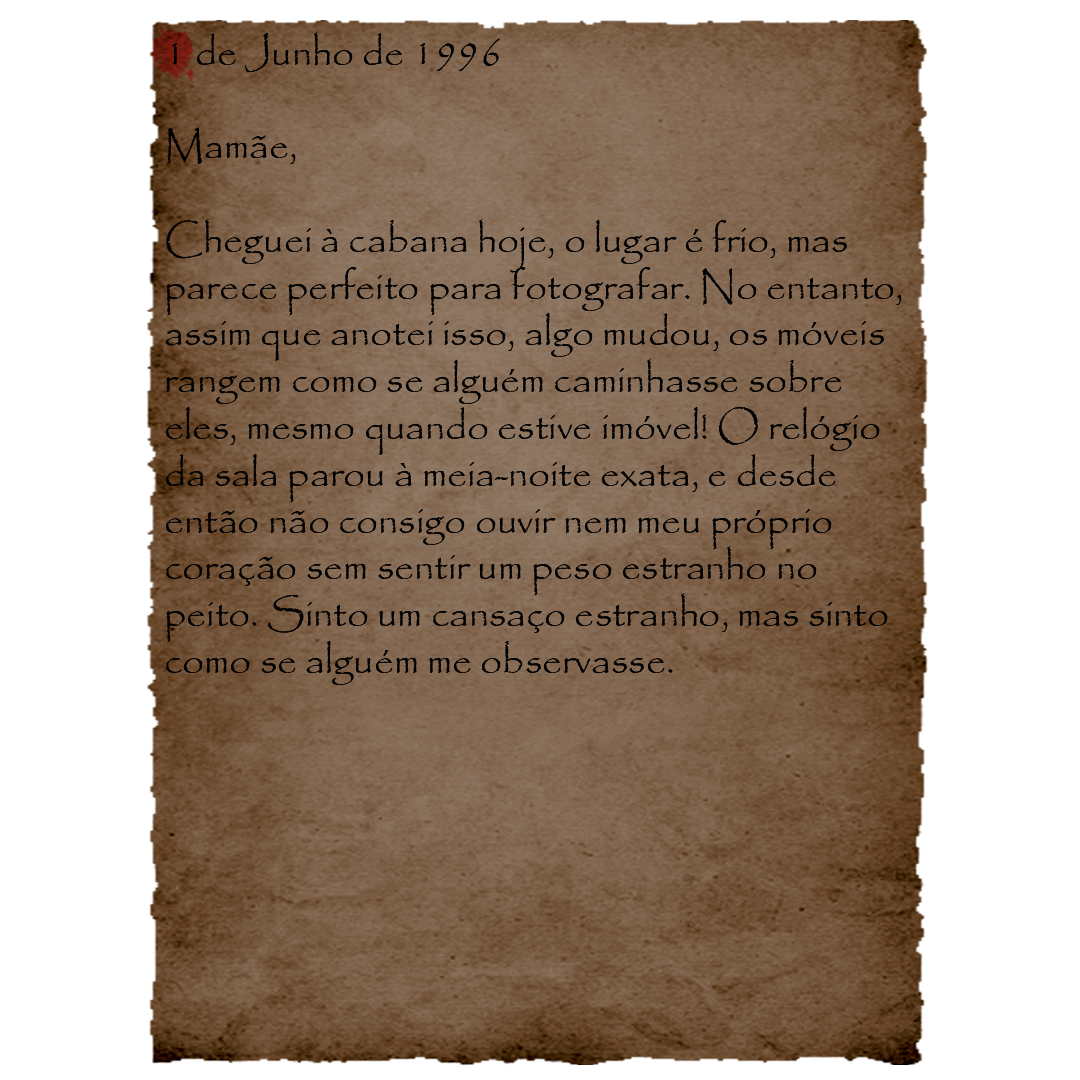
<style>
.page{position:relative;width:1080px;height:1080px;background:#ffffff}
.page>*{position:absolute;margin:0}
.t1{font:39px "Papyrus-Regular";color:#000000}
</style>
<div class="page">
<p class="t1" style="left:165px;top:32px;width:737px;height:653px">1 de Junho de 1996<br><br>Mamãe,<br><br>Cheguei à cabana hoje, o lugar é frio, mas parece perfeito para fotografar. No entanto, assim que anotei isso, algo mudou, os móveis rangem como se alguém caminhasse sobre eles, mesmo quando estive imóvel! O relógio da sala parou à meia-noite exata, e desde então não consigo ouvir nem meu próprio coração sem sentir um peso estranho no peito. Sinto um cansaço estranho, mas sinto como se alguém me observasse.</p>
</div>
